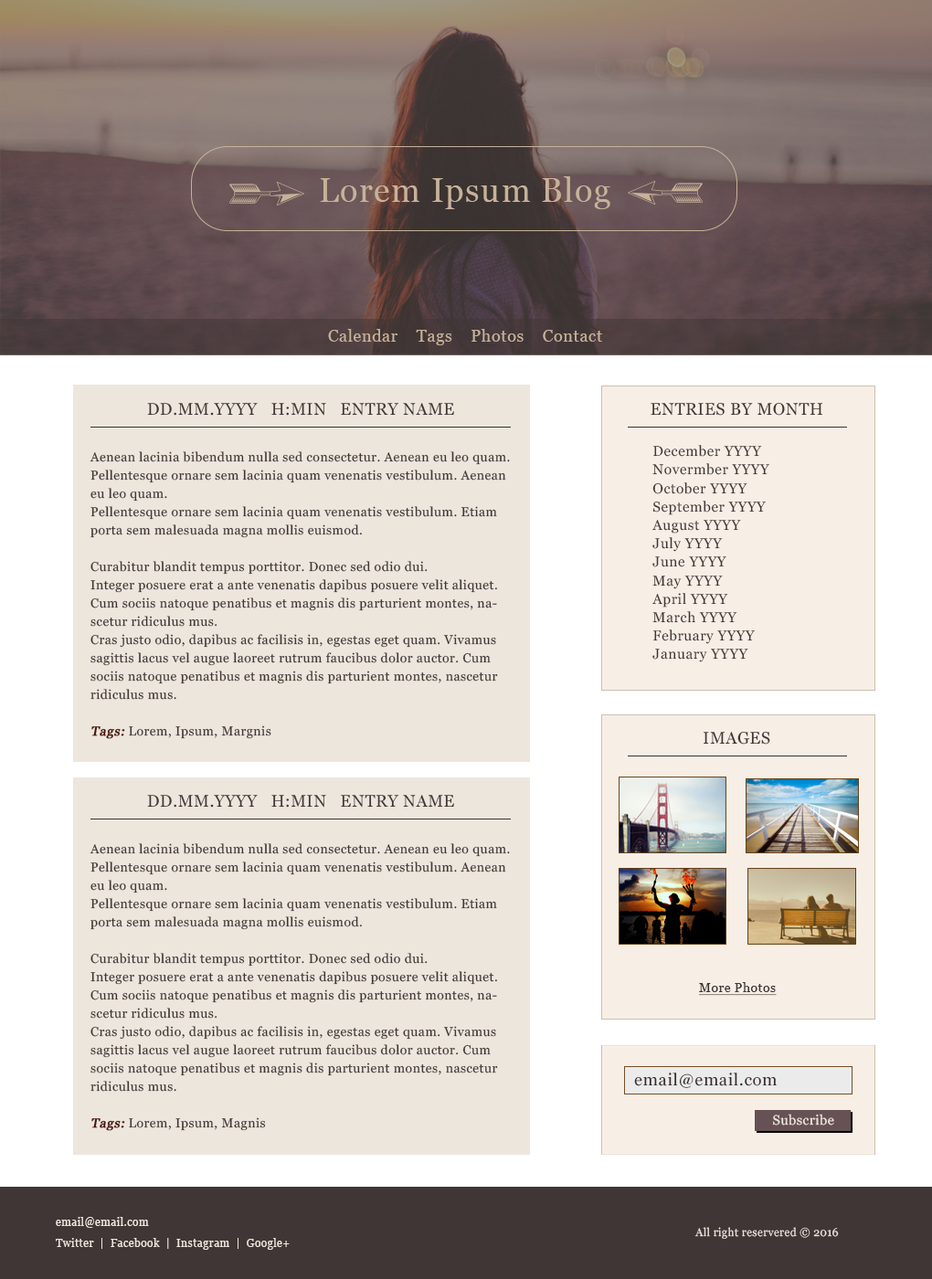
<style>
.page{position:relative;width:932px;height:1279px}
.page>*{position:absolute;margin:0}
.t1{font:33.8px "Georgia";letter-spacing:0.035em;color:#c7b299}
.t2{font:16.4px "Georgia";letter-spacing:0.035em;color:#c7b299}
.t3{font:16.7px "Georgia";letter-spacing:0.035em;color:#403634}
.t4{font:16.7px "Georgia";letter-spacing:0.035em;color:#403634;text-transform:uppercase}
.t5{font:14.2px/18.5px "Georgia";letter-spacing:0.035em;color:#403634}
.t6{font:12.8px/18.3px "Georgia";letter-spacing:0.035em;color:#403634}
.t7{font:12.8px/18.3px "Georgia";letter-spacing:0.035em;color:#4b1207;font-weight:bold;font-style:italic}
.t8{font:12.8px "Georgia";letter-spacing:0.035em;color:#403634;text-decoration:underline}
.t9{font:16.7px "Georgia";letter-spacing:0.035em;color:#3a292b}
.t10{font:13.4px "Georgia";letter-spacing:0.035em;color:#ede6dd}
.t11{font:11px/21.4px "Georgia";letter-spacing:0.035em;color:#ede6dd}
.t12{font:11.1px "Georgia";letter-spacing:0.035em;color:#ede6dd}
</style>
<div class="page">
<p class="t1" style="left:320px;top:176px;width:290px;height:33px">Lorem Ipsum Blog</p>
<p class="t2" style="left:328px;top:329px;width:274px;height:16px">Calendar    Tags    Photos    Contact</p>
<p class="t3" style="left:147px;top:403px;width:307px;height:13px">DD.MM.YYYY   H:MIN   ENTRY NAME</p>
<p class="t4" style="left:651px;top:402px;width:171px;height:14px">Entries by month</p>
<p class="t5" style="left:652px;top:445px;width:117px;height:218px">December YYYY<br>Novermber YYYY<br>October YYYY<br>September YYYY<br>August YYYY<br>July YYYY<br>June YYYY<br>May YYYY<br>April YYYY<br>March YYYY<br>February YYYY<br>January YYYY</p>
<p class="t6" style="left:90px;top:451px;width:420px;height:288px">Aenean lacinia bibendum nulla sed consectetur. Aenean eu leo quam. Pellentesque ornare sem lacinia quam venenatis vestibulum. Aenean eu leo quam. <br>Pellentesque ornare sem lacinia quam venenatis vestibulum. Etiam porta sem malesuada magna mollis euismod.<br><br>Curabitur blandit tempus porttitor. Donec sed odio dui. <br>Integer posuere erat a ante venenatis dapibus posuere velit aliquet. Cum sociis natoque penatibus et magnis dis parturient montes, nascetur ridiculus mus. <br>Cras justo odio, dapibus ac facilisis in, egestas eget quam. Vivamus sagittis lacus vel augue laoreet rutrum faucibus dolor auctor. Cum sociis natoque penatibus et magnis dis parturient montes, nascetur ridiculus mus.<br><br><span class="t7">Tags:</span> Lorem, Ipsum, Margnis</p>
<p class="t4" style="left:704px;top:731px;width:66px;height:14px">Images</p>
<p class="t3" style="left:147px;top:795px;width:307px;height:13px">DD.MM.YYYY   H:MIN   ENTRY NAME</p>
<p class="t6" style="left:90px;top:843px;width:420px;height:288px">Aenean lacinia bibendum nulla sed consectetur. Aenean eu leo quam. Pellentesque ornare sem lacinia quam venenatis vestibulum. Aenean eu leo quam. <br>Pellentesque ornare sem lacinia quam venenatis vestibulum. Etiam porta sem malesuada magna mollis euismod.<br><br>Curabitur blandit tempus porttitor. Donec sed odio dui. <br>Integer posuere erat a ante venenatis dapibus posuere velit aliquet. Cum sociis natoque penatibus et magnis dis parturient montes, nascetur ridiculus mus. <br>Cras justo odio, dapibus ac facilisis in, egestas eget quam. Vivamus sagittis lacus vel augue laoreet rutrum faucibus dolor auctor. Cum sociis natoque penatibus et magnis dis parturient montes, nascetur ridiculus mus.<br><br><span class="t7">Tags:</span> Lorem, Ipsum, Magnis</p>
<p class="t8" style="left:699px;top:982px;width:78px;height:14px">More Photos</p>
<p class="t9" style="left:634px;top:1073px;width:143px;height:15px">email@email.com</p>
<p class="t10" style="left:773px;top:1114px;width:61px;height:12px">Subscribe</p>
<p class="t11" style="left:56px;top:1217px;width:234px;height:33px">email@email.com<br>Twitter  |  Facebook  |  Instagram  |  Google+</p>
<p class="t12" style="left:694px;top:1227px;width:145px;height:12px">All right reservered © 2016</p>
</div>
